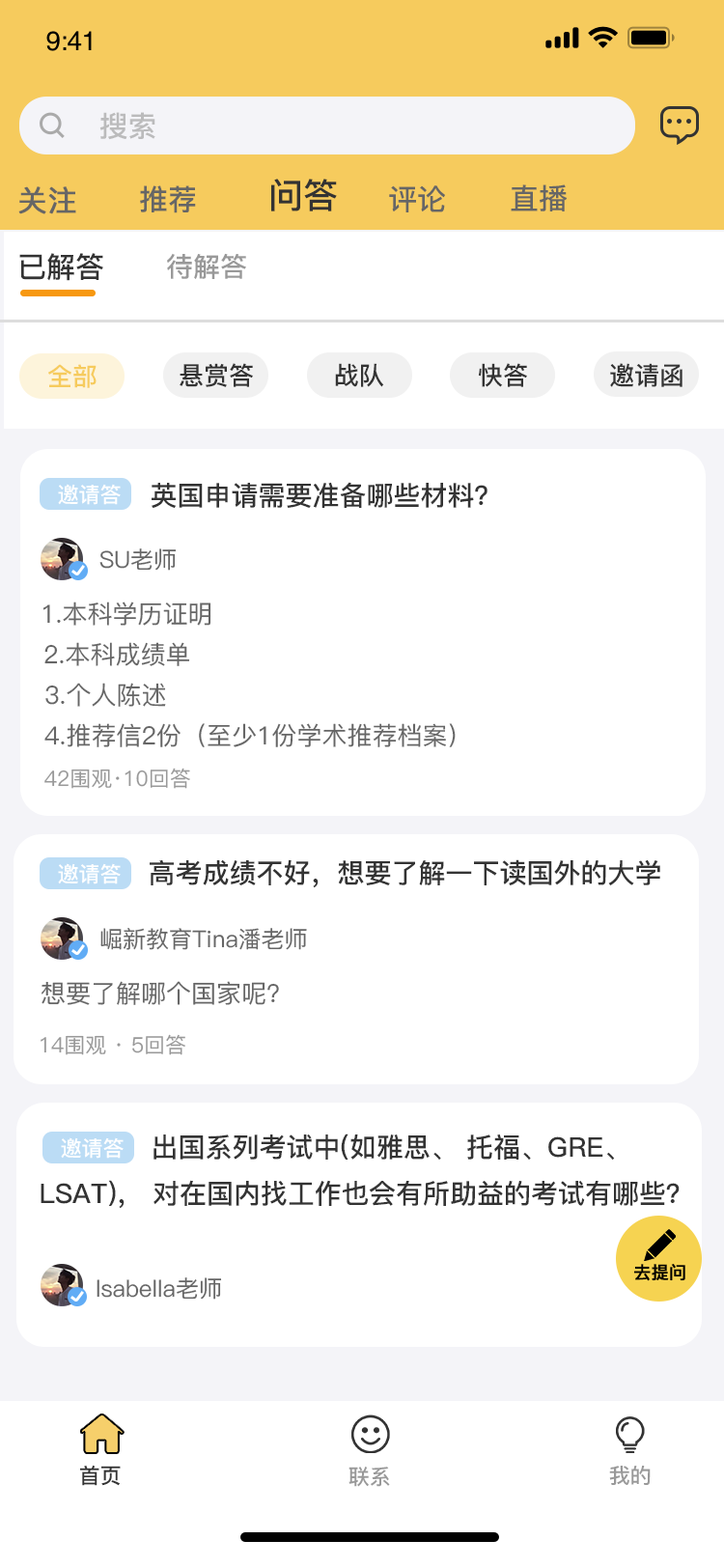
<style>
.page{position:relative;width:724px;height:1568px;background:#ffffff}
.page>*{position:absolute;margin:0}
.t1{font:29px "PingFang-SC-Bold";color:#bbbbbc}
.t2{font:29px "PingFang-SC-Bold";color:#666666}
.t3{font:34.8px "PingFang-SC-Bold";color:#333333}
.t4{font:29px "PingFang-SC-Medium";color:#666666;font-weight:bold}
.t5{font:29px "PingFang-SC-Bold";color:#333333}
.t6{font:27px "PingFang-SC-Bold";color:#999999}
.t7{font:25.1px "PingFang-SC-Bold";color:#f6cb5d}
.t8{font:25.1px "PingFang-SC-Bold";color:#333333}
.t9{font:21.2px "PingFang-SC-Bold";color:#ffffff}
.t10{font:27px "PingFang-SC-Bold";color:#333333}
.t11{font:23.2px "PingFang-SC-Medium";color:#666666}
.t12{font:25.1px "PingFang-SC-Medium";color:#666666}
.t13{font:21.2px "PingFang-SC-Medium";color:#999999}
.t14{font:17.4px "PingFang-SC-Bold";color:#000000;font-weight:bold}
.t15{font:21.2px "PingFang-SC-Bold";color:#333333}
.t16{font:21.2px "PingFang-SC-Bold";color:#999999}
</style>
<div class="page">
<p class="t1" style="left:99px;top:112px;width:56px;height:28px">搜索</p>
<p class="t2" style="left:140px;top:185px;width:56px;height:28px">推荐</p>
<p class="t3" style="left:271px;top:179px;width:66px;height:32px">问答</p>
<p class="t2" style="left:389px;top:185px;width:56px;height:27px">评论</p>
<p class="t2" style="left:511px;top:184px;width:57px;height:27px">直播</p>
<p class="t4" style="left:18px;top:186px;width:58px;height:28px">关注</p>
<p class="t5" style="left:19px;top:253px;width:84px;height:28px">已解答</p>
<p class="t6" style="left:167px;top:253px;width:79px;height:26px">待解答</p>
<p class="t7" style="left:48px;top:364px;width:49px;height:24px">全部</p>
<p class="t8" style="left:180px;top:363px;width:73px;height:24px">悬赏答</p>
<p class="t8" style="left:335px;top:363px;width:49px;height:24px">战队</p>
<p class="t8" style="left:478px;top:363px;width:49px;height:24px">快答</p>
<p class="t8" style="left:610px;top:363px;width:73px;height:24px">邀请函</p>
<p class="t9" style="left:58px;top:484px;width:63px;height:21px">邀请答</p>
<p class="t10" style="left:152px;top:482px;width:336px;height:26px">英国申请需要准备哪些材料？</p>
<p class="t11" style="left:99px;top:548px;width:78px;height:23px">SU老师</p>
<p class="t12" style="left:42px;top:602px;width:169px;height:24px">1.本科学历证明</p>
<p class="t12" style="left:44px;top:642px;width:146px;height:24px">2.本科成绩单</p>
<p class="t12" style="left:45px;top:683px;width:121px;height:24px">3.个人陈述</p>
<p class="t12" style="left:44px;top:723px;width:412px;height:24px">4.推荐信2份（至少1份学术推荐档案）</p>
<p class="t13" style="left:44px;top:768px;width:146px;height:21px">42围观·10回答</p>
<p class="t9" style="left:58px;top:863px;width:63px;height:21px">邀请答</p>
<p class="t10" style="left:150px;top:859px;width:510px;height:29px">高考成绩不好，想要了解一下读国外的大学</p>
<p class="t11" style="left:100px;top:928px;width:207px;height:22px">崛新教育Tina潘老师</p>
<p class="t12" style="left:42px;top:981px;width:237px;height:24px">想要了解哪个国家呢?</p>
<p class="t13" style="left:41px;top:1034px;width:144px;height:21px">14围观 · 5回答</p>
<p class="t10" style="left:154px;top:1134px;width:461px;height:27px">出国系列考试中(如雅思、 托福、GRE、</p>
<p class="t9" style="left:61px;top:1137px;width:63px;height:22px">邀请答</p>
<p class="t10" style="left:41px;top:1180px;width:639px;height:29px">LSAT)， 对在国内找工作也会有所助益的考试有哪些？</p>
<p class="t14" style="left:633px;top:1264px;width:53px;height:17px">去提问</p>
<p class="t11" style="left:97px;top:1277px;width:125px;height:23px">lsabella老师</p>
<p class="t15" style="left:80px;top:1465px;width:41px;height:21px">首页</p>
<p class="t16" style="left:349px;top:1467px;width:41px;height:20px">联系</p>
<p class="t16" style="left:609px;top:1466px;width:42px;height:19px">我的</p>
</div>
